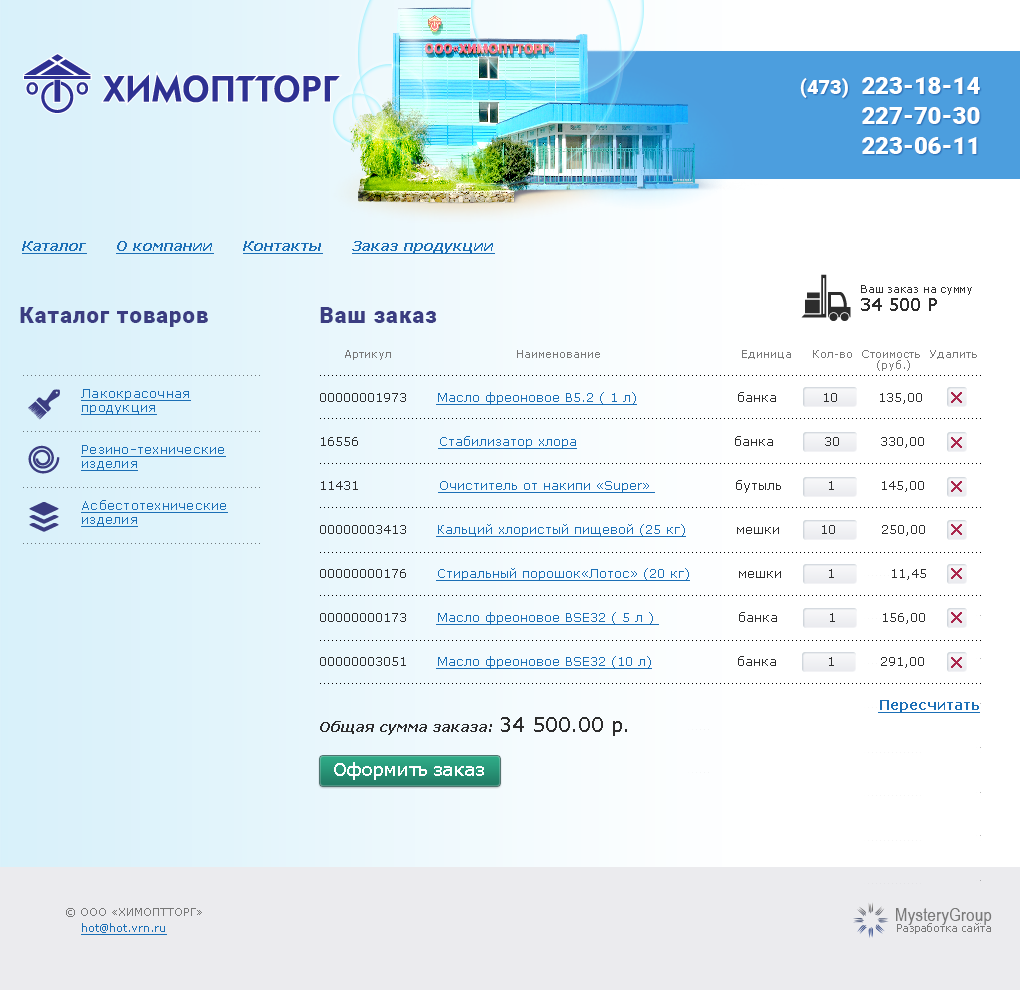
<style>
.page{position:relative;width:1020px;height:990px}
.page>*{position:absolute;margin:0}
.t1{font:24px/30px "Roboto-Black";color:#ffffff}
.t2{font:20px/33.8px "Roboto-Black";color:#ffffff}
.t3{font:14px "Verdana-BoldItalic";color:#1b6fb6;text-decoration:underline}
.t4{font:11px/9px "Verdana";letter-spacing:-0.02em;color:#2d2d2d}
.t5{font:18px/9px "Verdana";color:#2d2d2d}
.t6{font:22px "Roboto-Black";letter-spacing:0.05em;color:#3b3d81}
.t7{font:11px/22px "Verdana";color:#787878}
.t8{font:13px/22px "Verdana";color:#2d2d2d}
.t9{font:13px/22px "Verdana";color:#1b6fb6;text-decoration:underline}
.t10{font:13px/14px "Verdana";color:#1b6fb6;text-decoration:underline}
.t11{font:13px/15px "Verdana";color:#1b6fb6;text-decoration:underline}
.t12{font:13px/14px "Verdana";color:#2d2d2d}
.t13{font:13px/29px "Verdana";color:#2d2d2d}
.t14{font:13px/29px "Verdana";color:#1b6fb6;text-decoration:underline}
.t15{font:14px/22px "Verdana-Bold";color:#1b6fb6;text-decoration:underline}
.t16{font:14px/22px "Verdana-BoldItalic";color:#2d2d2d}
.t17{font:20px/22px "Verdana";color:#2d2d2d}
.t18{font:18px/22px "Verdana";color:#ffffff}
.t19{font:11px "Verdana";color:#787878}
.t20{font:13px/14px "Verdana";letter-spacing:0.02em;color:#1b6fb6;text-decoration:underline}
.t21{font:11px/16px "Verdana";color:#787878}
.t22{font:11px/16px "Verdana";color:#1b6fb6;text-decoration:underline}
.t23{font:18px "ArialNarrow";letter-spacing:0.02em;color:#787878}
.t24{font:11px "Tahoma";letter-spacing:0.025em;color:#787878}
</style>
<div class="page">
<p class="t1" style="left:800px;top:77px;width:180px;height:77px;text-align:right"><span class="t2">(473)   </span>223-18-14<br>227-70-30<br>223-06-11</p>
<p class="t3" style="left:22px;top:241px;width:473px;height:13px">Каталог      О компании      Контакты      Заказ продукции</p>
<p class="t4" style="left:861px;top:285px;width:111px;height:26px">Ваш заказ на сумму<br><br><span class="t5">34 500 Р</span></p>
<p class="t6" style="left:20px;top:307px;width:188px;height:20px">Каталог товаров</p>
<p class="t6" style="left:320px;top:307px;width:117px;height:16px">Ваш заказ</p>
<p class="t7" style="left:320px;top:350px;width:660px;height:430px"><span class="t8">     </span>Артикул                               Наименование                                   Единица     Кол-во  Стоимость  Удалить    <br><span class="t8">  <br>00000001973      </span><span class="t9">Масло фреоновое B5.2 ( 1 л)      </span><span class="t8">              банка         10        135,00<br><br>16556                </span><span class="t9">Стабилизатор хлора                  </span><span class="t8">          банка          30        330,00<br> <br>11431                </span><span class="t9">Очиститель от накипи «Super» </span><span class="t8">                бутыль         1         145,00 <br><br>00000003413      </span><span class="t10">Кальций хлористый </span><span class="t11">пищевой (25 кг) </span><span class="t12">         мешки        10         250,00<br><br></span><span class="t13">00000000176      </span><span class="t14">Стиральный порошок</span><span class="t10">«Лотос» (20 кг)          </span><span class="t13">мешки         1           11,45                          <br></span><span class="t8"><br>00000000173      </span><span class="t9">Масло фреоновое BSE32 ( 5 л )       </span><span class="t8">          банка          1         156,00 <br><br>00000003051      </span><span class="t9">Масло фреоновое BSE32 (10 л)</span><span class="t8">                 банка          1         291,00 <br><br>                                                                                                                </span><span class="t15">Пересчитать<br></span><span class="t16">Общая сумма заказа: </span><span class="t17">34 500.00 р.<br><br>  </span><span class="t18">Оформить заказ</span></p>
<p class="t19" style="left:877px;top:360px;width:33px;height:11px">(руб.)</p>
<p class="t20" style="left:81px;top:389px;width:147px;height:138px">Лакокрасочная<br>продукция<br><br><br>Резино-технические<br>изделия<br><br><br>Асбестотехнические<br>изделия</p>
<p class="t21" style="left:66px;top:908px;width:136px;height:27px">© ООО «ХИМОПТТОРГ» <br>    <span class="t22">hot@hot.vrn.ru</span></p>
<p class="t23" style="left:896px;top:908px;width:96px;height:17px">MysteryGroup</p>
<p class="t24" style="left:897px;top:923px;width:94px;height:11px">Разработка сайта</p>
</div>
